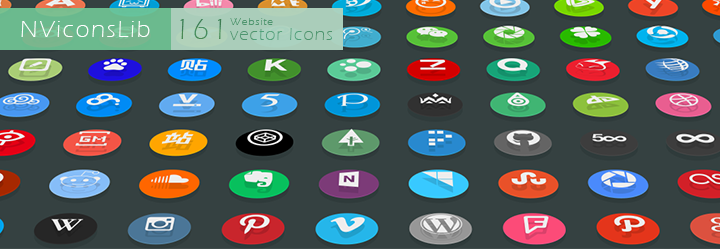
<style>
.page{position:relative;width:720px;height:249px;background:#354141}
.page>*{position:absolute;margin:0}
.t1{font:23.8px "ErasITC-Light";letter-spacing:0.087em;color:#ffffff}
.t2{font:30px "ErasITC-Light";letter-spacing:0.087em;color:#498953}
.t3{font:18px "ErasITC-Light";letter-spacing:0.087em;color:#498953}
.t4{font:18px/9.4px "ErasITC-Light";letter-spacing:0.067em;color:#4e956f}
.t5{font:11px/9.4px "ErasITC-Light";letter-spacing:0.087em;color:#4e956f}
</style>
<div class="page">
<p class="t1" style="left:21px;top:21px;width:129px;height:16px">NViconsLib</p>
<p class="t2" style="left:180px;top:19px;width:42px;height:20px"><span class="t3">  </span>161</p>
<p class="t2" style="left:180px;top:19px;width:42px;height:20px"><span class="t3">  </span>161</p>
<p class="t4" style="left:230px;top:18px;width:102px;height:22px"><span class="t5">Website <br></span>vector Icons</p>
<p class="t4" style="left:230px;top:18px;width:102px;height:22px"><span class="t5">Website <br></span>vector Icons</p>
</div>
